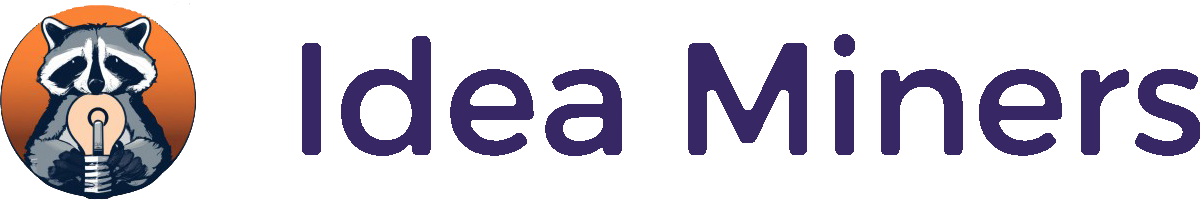
<style>
.page{position:relative;width:1200px;height:200px;background:#ffffff}
.page>*{position:absolute;margin:0}
.t1{font:160px "TruenoRound";color:#372865}
</style>
<div class="page">
<p class="t1" style="left:302px;top:34px;width:899px;height:122px">Idea Miners</p>
</div>
